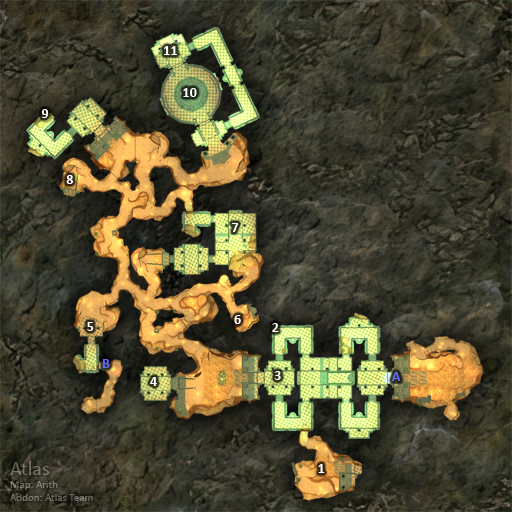
<style>
.page{position:relative;width:512px;height:512px}
.page>*{position:absolute;margin:0}
.t1{font:14px "Calibri-Bold";color:#ffffff}
.t2{font:14px "Calibri-Bold";color:#6666ff}
</style>
<div class="page">
<p class="t1" style="left:164px;top:46px;width:13px;height:9px">11</p>
<p class="t1" style="left:183px;top:88px;width:14px;height:9px">10</p>
<p class="t1" style="left:41px;top:109px;width:8px;height:9px">9</p>
<p class="t1" style="left:66px;top:175px;width:7px;height:9px">8</p>
<p class="t1" style="left:231px;top:223px;width:8px;height:9px">7</p>
<p class="t1" style="left:234px;top:315px;width:7px;height:9px">6</p>
<p class="t1" style="left:87px;top:322px;width:7px;height:9px">5</p>
<p class="t1" style="left:272px;top:323px;width:7px;height:9px">2</p>
<p class="t2" style="left:102px;top:359px;width:8px;height:9px">B</p>
<p class="t1" style="left:150px;top:377px;width:7px;height:9px">4</p>
<p class="t1" style="left:274px;top:371px;width:7px;height:9px">3</p>
<p class="t2" style="left:392px;top:372px;width:9px;height:9px">A</p>
<p class="t1" style="left:318px;top:464px;width:7px;height:9px">1</p>
</div>
